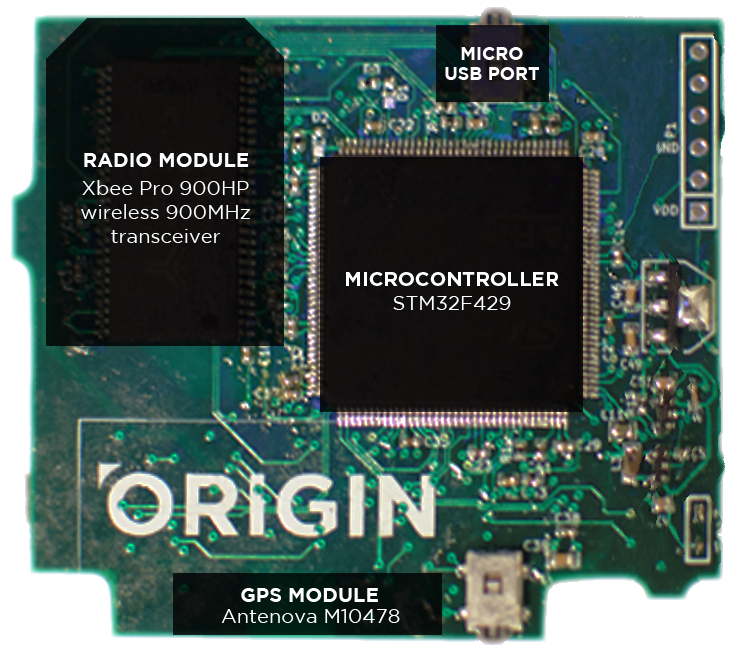
<style>
.page{position:relative;width:742px;height:651px}
.page>*{position:absolute;margin:0}
.t1{font:18px/20px "GothamBold";color:#ffffff}
.t2{font:20px "GothamBold";color:#ffffff}
.t3{font:20px "GothamBook";color:#ffffff}
.t4{font:20px "Gotham-Bold";color:#ffffff}
</style>
<div class="page">
<p class="t1" style="left:445px;top:47px;width:94px;height:33px;text-align:center">MICRO <br>USB PORT</p>
<p class="t2" style="left:84px;top:153px;width:165px;height:14px">RADIO MODULE</p>
<p class="t3" style="left:81px;top:180px;width:169px;height:63px;text-align:center">Xbee Pro 900HP<br>wireless 900MHz transceiver</p>
<p class="t4" style="left:346px;top:272px;width:213px;height:38px;text-align:center">MICROCONTROLLER<br><span class="t3">STM32F429</span></p>
<p class="t2" style="left:241px;top:588px;width:137px;height:14px">GPS MODULE</p>
<p class="t3" style="left:221px;top:609px;width:179px;height:14px">Antenova M10478</p>
</div>
